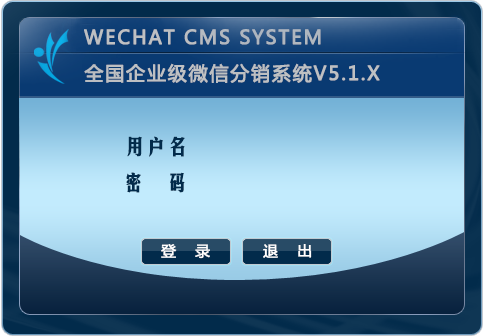
<style>
.page{position:relative;width:483px;height:336px}
.page>*{position:absolute;margin:0}
.t1{font:18.9px "MicrosoftYaHei";letter-spacing:0.075em;color:#bfc1c3;text-transform:uppercase;font-weight:bold}
</style>
<div class="page">
<p class="t1" style="left:84px;top:29px;width:237px;height:16px">WeChat CMS System</p>
<p class="t1" style="left:84px;top:63px;width:296px;height:20px">全国企业级微信分销系统V5.1.X</p>
</div>
